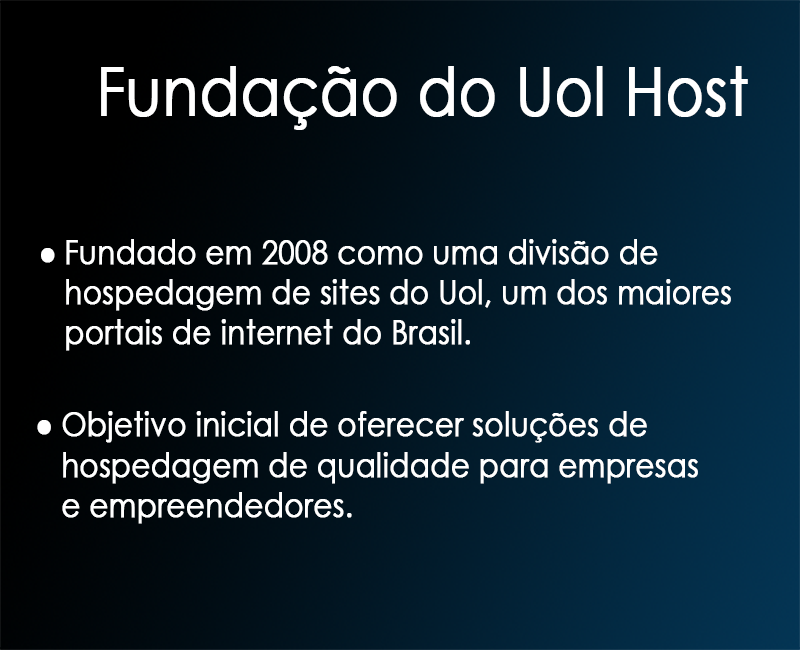
<style>
.page{position:relative;width:800px;height:650px}
.page>*{position:absolute;margin:0}
.t1{font:66.9px "CenturyGothic";color:#ffffff;font-weight:bold;scale:0.86 1}
.t2{font:33.4px "CenturyGothic";color:#ffffff;font-weight:bold;scale:0.86 1}
</style>
<div class="page">
<p class="t1" style="left:101px;top:66px;width:647px;height:64px">Fundação do Uol Host</p>
<p class="t2" style="left:66px;top:239px;width:665px;height:112px">Fundado em 2008 como uma divisão de<br>hospedagem de sites do Uol, um dos maiores<br>portais de internet do Brasil.</p>
<p class="t2" style="left:41px;top:248px;width:14px;height:15px">●</p>
<p class="t2" style="left:62px;top:411px;width:636px;height:113px">Objetivo inicial de oferecer soluções de<br>hospedagem de qualidade para empresas<br>e empreendedores.</p>
<p class="t2" style="left:37px;top:420px;width:14px;height:15px">●</p>
</div>
